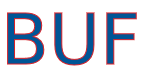
<style>
.page{position:relative;width:143px;height:77px;background:#ffffff}
.page>*{position:absolute;margin:0}
.t1{font:70px "DejaVuSans";color:#005596}
</style>
<div class="page">
<p class="t1" style="left:6px;top:11px;width:132px;height:55px">BUF</p>
</div>
